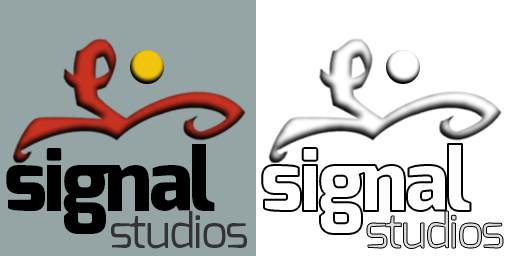
<style>
.page{position:relative;width:512px;height:256px;background:#ffffff}
.page>*{position:absolute;margin:0}
.t1{font:85px "Exo-ExtraBold";letter-spacing:-0.04em;color:#000000}
.t2{font:47px "Exo-Regular";letter-spacing:-0.04em;color:#333333}
.t3{font:47px "Exo-Regular";letter-spacing:-0.04em;color:#dddddd}
</style>
<div class="page">
<p class="t1" style="left:6px;top:144px;width:209px;height:90px">signal</p>
<p class="t2" style="left:111px;top:211px;width:136px;height:38px">studios</p>
<p class="t3" style="left:367px;top:211px;width:136px;height:38px">studios</p>
</div>
